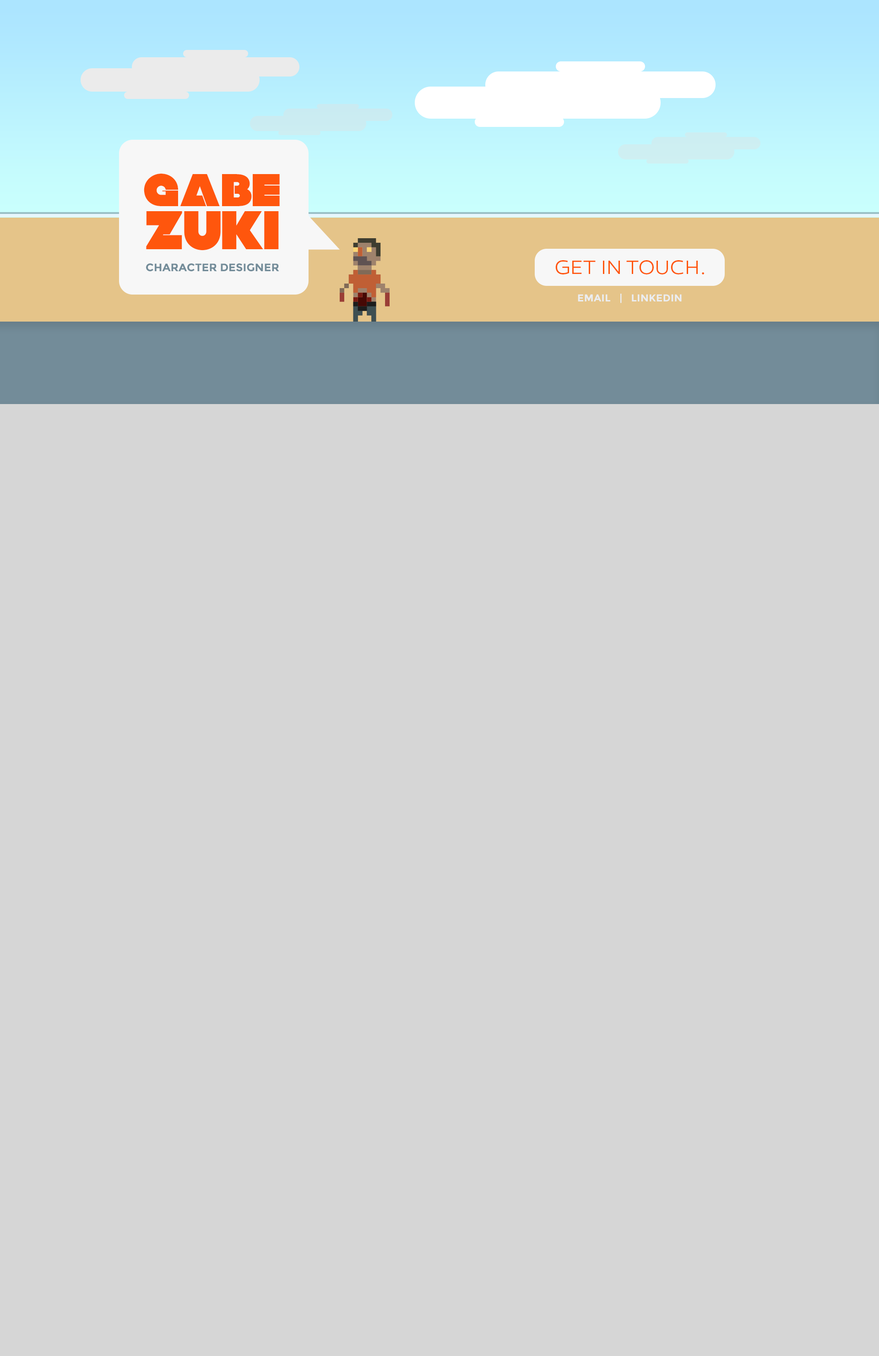
<style>
.page{position:relative;width:879px;height:1356px;background:#d6d6d6}
.page>*{position:absolute;margin:0}
.t1{font:45.6px "Null-Free";color:#ff560d}
.t2{font:54.4px "Null-Free";color:#ff560d}
.t3{font:10.8px "Montserrat-Bold";color:#738c99}
.t4{font:19.8px "Canaro-LightDEMO";color:#ff560d}
.t5{font:10px "Montserrat-Bold";letter-spacing:0.025em;color:#ebedf0}
</style>
<div class="page">
<p class="t1" style="left:144px;top:174px;width:136px;height:32px">GABE</p>
<p class="t2" style="left:146px;top:211px;width:133px;height:40px">ZUKI</p>
<p class="t3" style="left:146px;top:263px;width:133px;height:9px">CHARACTER DESIGNER</p>
<p class="t4" style="left:556px;top:260px;width:148px;height:14px">GET IN TOUCH.</p>
<p class="t5" style="left:578px;top:294px;width:104px;height:9px">EMAIL   |   LINKEDIN</p>
</div>
